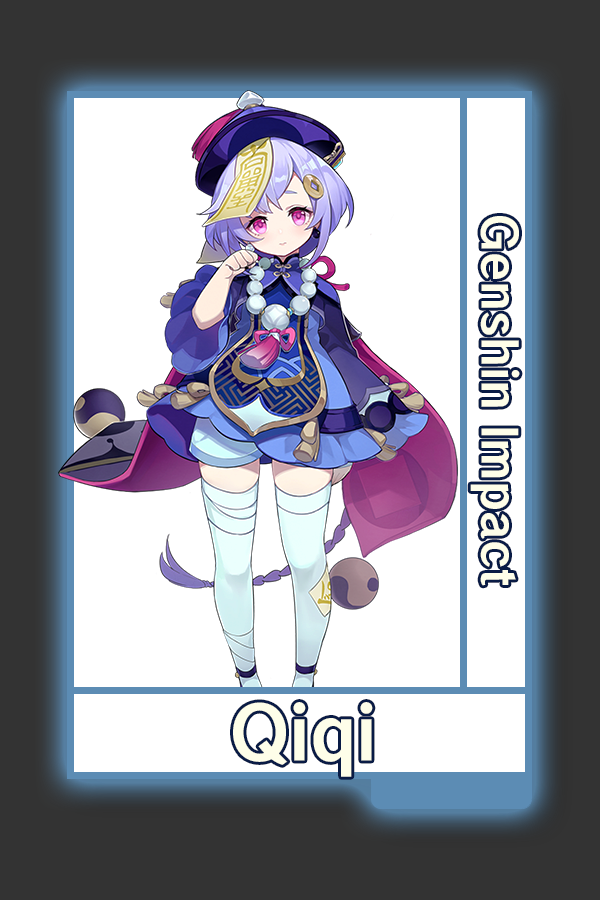
<style>
.page{position:relative;width:600px;height:900px;background:#ffffff}
.page>*{position:absolute;margin:0}
.t1{font:48.8px "HYWenHei-HEW";color:#fefef4}
.t2{font:75px "HYWenHei-HEW";color:#fefef4}
</style>
<div class="page">
<p class="t1" style="left:470px;top:216px;width:50px;height:370px;rotate:90deg">Genshin Impact</p>
<p class="t2" style="left:233px;top:702px;width:140px;height:75px">Qiqi</p>
</div>
